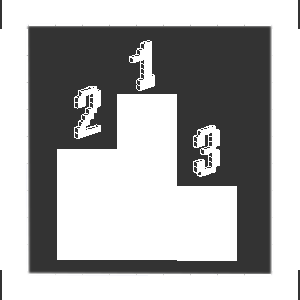
<style>
.page{position:relative;width:300px;height:300px;background:#ffffff}
.page>*{position:absolute;margin:0}
.t1{font:58.3px "Blox-(BRK";color:#ffffff}
</style>
<div class="page">
<p class="t1" style="left:129px;top:40px;width:26px;height:51px">1</p>
<p class="t1" style="left:74px;top:86px;width:27px;height:53px">2</p>
<p class="t1" style="left:193px;top:125px;width:27px;height:52px">3</p>
</div>
